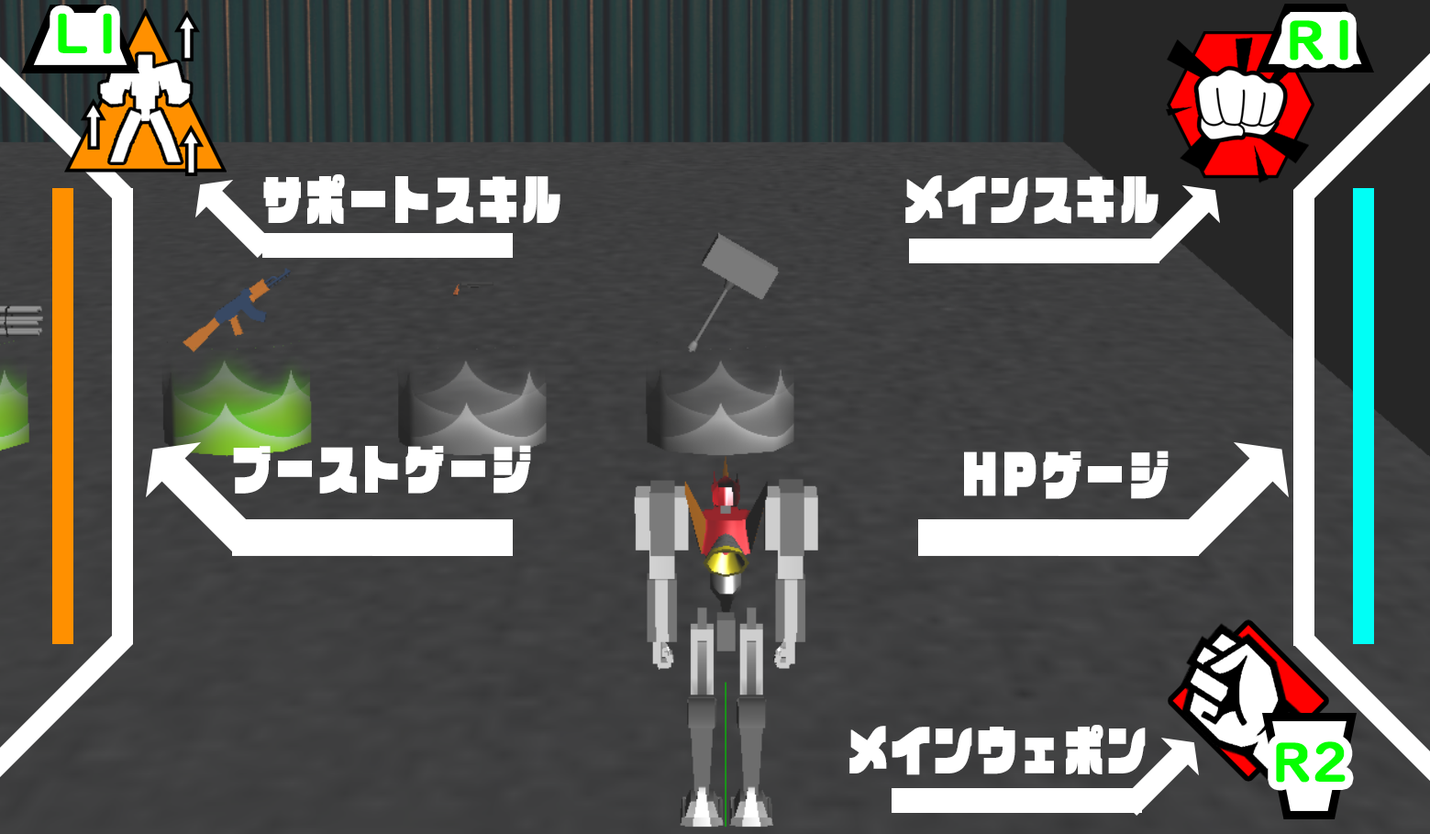
<style>
.page{position:relative;width:1430px;height:834px}
.page>*{position:absolute;margin:0}
.t1{font:52.6px "UDDigiKyokashoNK-B";color:#06ff00;font-weight:bold}
.t2{font:52.6px "VDL-LogoJrBlack-Black";letter-spacing:0.1em;color:#ffffff;font-weight:bold;scale:0.73 1}
</style>
<div class="page">
<p class="t1" style="left:58px;top:13px;width:54px;height:41px">L1</p>
<p class="t1" style="left:1290px;top:19px;width:58px;height:42px">R1</p>
<p class="t2" style="left:263px;top:174px;width:297px;height:50px">サポートスキル</p>
<p class="t2" style="left:905px;top:175px;width:254px;height:50px">メインスキル</p>
<p class="t2" style="left:233px;top:445px;width:298px;height:49px">ブーストゲージ</p>
<p class="t2" style="left:964px;top:450px;width:205px;height:49px">HPゲージ</p>
<p class="t2" style="left:849px;top:725px;width:297px;height:50px">メインウェポン</p>
<p class="t1" style="left:1276px;top:741px;width:70px;height:41px">R2</p>
</div>
